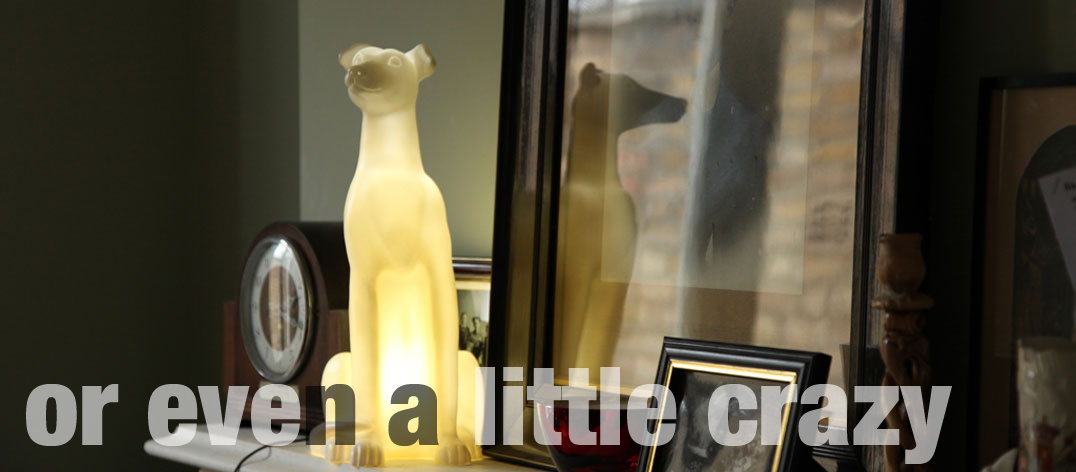
<style>
.page{position:relative;width:1076px;height:472px}
.page>*{position:absolute;margin:0}
.t1{font:109.6px "HelveticaNeue-CondensedBlack"}
</style>
<div class="page">
<p class="t1" style="left:26px;top:367px;width:926px;height:97px">or even a little crazy</p>
</div>
